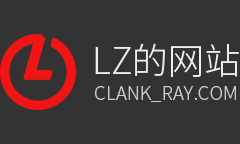
<style>
.page{position:relative;width:240px;height:144px;background:#333333}
.page>*{position:absolute;margin:0}
.t1{font:36px "NotoSansHans-Light";color:#eeeeee;text-transform:uppercase}
.t2{font:18px "NotoSansHans-Light";color:#cccccc;text-transform:uppercase;scale:1.03 1}
</style>
<div class="page">
<p class="t1" style="left:95px;top:43px;width:144px;height:34px">LZ的网站</p>
<p class="t2" style="left:95px;top:86px;width:141px;height:16px">Clank_RAY.com</p>
</div>
